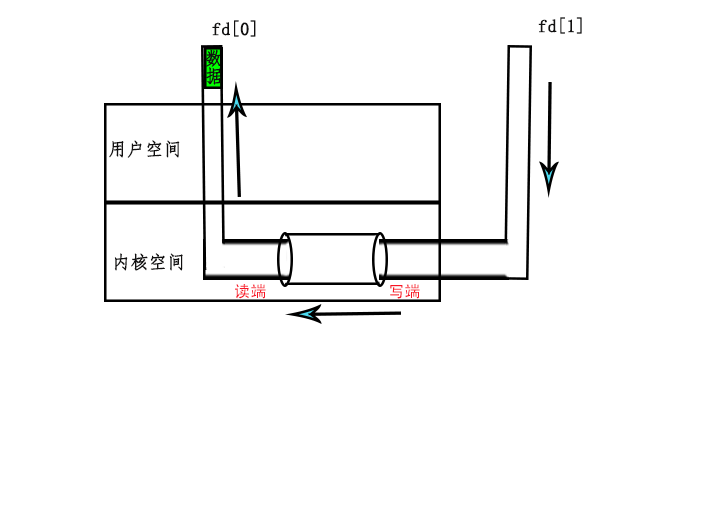
<style>
.page{position:relative;width:709px;height:510px;background:#ffffff}
.page>*{position:absolute;margin:0}
.t1{font:18px "FangSong";color:#111010;font-weight:bold}
.t2{font:16px "AdobeHeitiStd-Regular";color:#f81525}
</style>
<div class="page">
<p class="t1" style="left:538px;top:17px;width:44px;height:17px">fd[1]</p>
<p class="t1" style="left:212px;top:20px;width:44px;height:17px">fd[0]</p>
<p class="t1" style="left:109px;top:140px;width:71px;height:18px">用户空间</p>
<p class="t1" style="left:114px;top:253px;width:69px;height:18px">内核空间</p>
<p class="t2" style="left:235px;top:284px;width:31px;height:15px">读端</p>
<p class="t2" style="left:390px;top:284px;width:30px;height:15px">写端</p>
</div>
